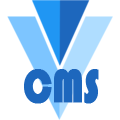
<style>
.page{position:relative;width:120px;height:120px;background:#ffffff}
.page>*{position:absolute;margin:0}
.t1{font:48px "Bauhaus93";letter-spacing:-0.025em;color:#1d67bd;font-weight:bold;scale:0.8 1}
</style>
<div class="page">
<p class="t1" style="left:24px;top:69px;width:75px;height:35px">CMS</p>
</div>
